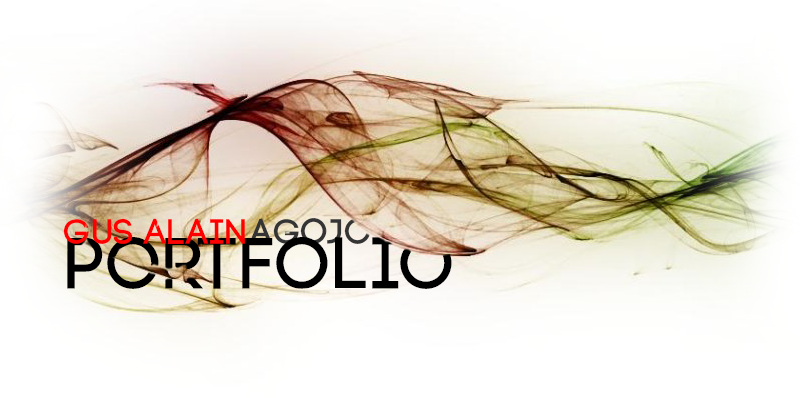
<style>
.page{position:relative;width:800px;height:398px}
.page>*{position:absolute;margin:0}
.t1{font:36px "Code-Pro-Demo";color:#ff0000}
.t2{font:36px "Code-Pro-Demo";color:#343434}
.t3{font:72px "Code-Pro-Demo";color:#000000}
</style>
<div class="page">
<p class="t1" style="left:63px;top:218px;width:182px;height:26px">Gus Alain</p>
<p class="t2" style="left:249px;top:218px;width:122px;height:26px">Agojo</p>
<p class="t3" style="left:67px;top:237px;width:385px;height:52px">Portfolio</p>
</div>
